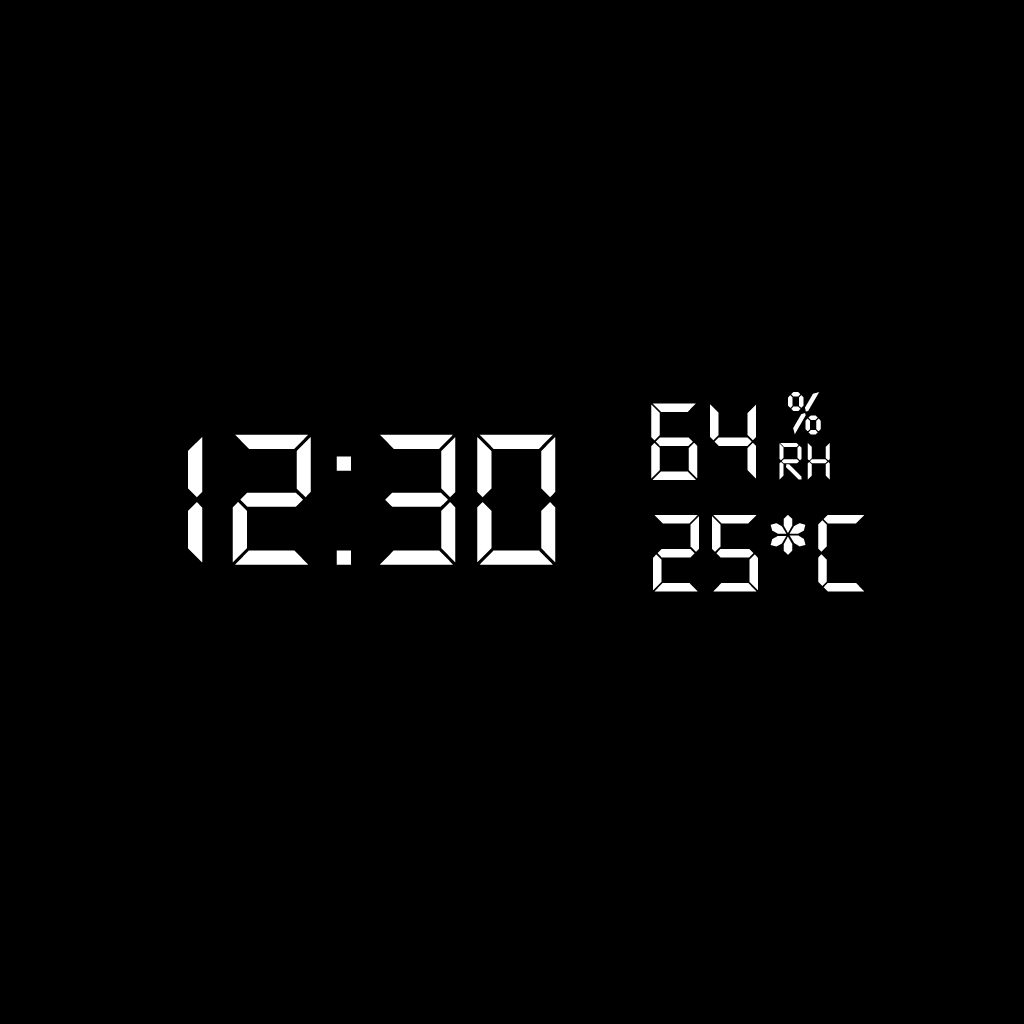
<style>
.page{position:relative;width:1024px;height:1024px;background:#000000}
.page>*{position:absolute;margin:0}
.t1{font:66px "DS-Digital";color:#ffffff}
.t2{font:120px "DS-Digital";color:#ffffff}
.t3{font:204px "DS-Digital";color:#ffffff}
.t4{font:57.6px "DS-Digital";color:#ffffff}
</style>
<div class="page">
<p class="t1" style="left:788px;top:392px;width:33px;height:43px">%</p>
<p class="t2" style="left:651px;top:403px;width:105px;height:77px">64</p>
<p class="t3" style="left:188px;top:434px;width:368px;height:131px">12:30</p>
<p class="t4" style="left:779px;top:443px;width:51px;height:37px">RH</p>
<p class="t2" style="left:653px;top:515px;width:211px;height:77px">25*C</p>
</div>
